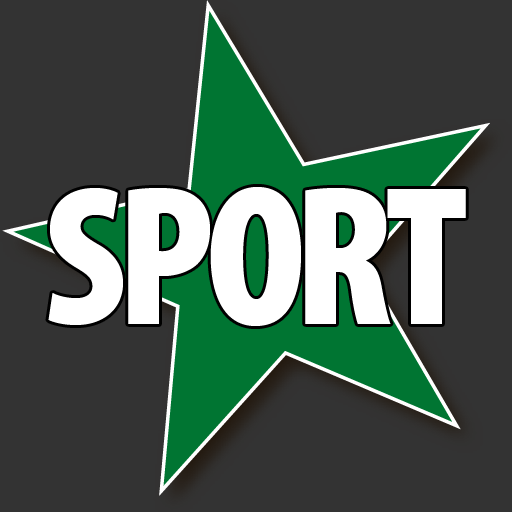
<style>
.page{position:relative;width:512px;height:512px;background:#333333}
.page>*{position:absolute;margin:0}
.t1{font:200px "MyriadPro-BlackCond";letter-spacing:-0.04em;color:#ffffff}
</style>
<div class="page">
<p class="t1" style="left:48px;top:187px;width:418px;height:139px">SPORT</p>
</div>
